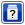
<style>
.page{position:relative;width:25px;height:25px}
.page>*{position:absolute;margin:0}
.t1{font:11px "ArialMT";color:#000000}
</style>
<div class="page">
<p class="t1" style="left:10px;top:10px;width:6px;height:8px">?</p>
</div>
